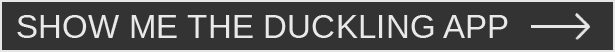
<style>
.page{position:relative;width:615px;height:52px;background:#333333}
.page>*{position:absolute;margin:0}
.t1{font:33.3px "Arimo-Regular";color:#e9e9e9}
</style>
<div class="page">
<p class="t1" style="left:17px;top:15px;width:491px;height:23px">SHOW ME THE DUCKLING APP</p>
</div>
